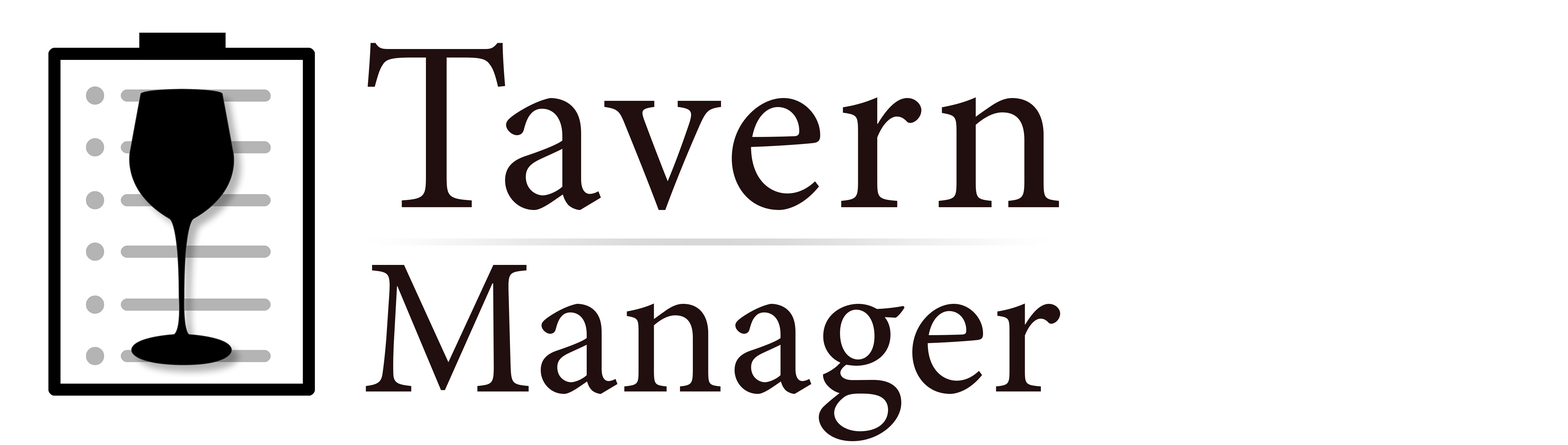
<style>
.page{position:relative;width:1568px;height:445px;background:#ffffff}
.page>*{position:absolute;margin:0}
.t1{font:194.9px/184.4px "MinionPro-Regular";letter-spacing:0.01em;color:#210f0f}
.t2{font:243.6px/184.4px "MinionPro-Regular";letter-spacing:0.028em;color:#210f0f}
</style>
<div class="page">
<p class="t1" style="left:366px;top:43px;width:694px;height:399px"><span class="t2">Tavern<br></span>Manager</p>
</div>
